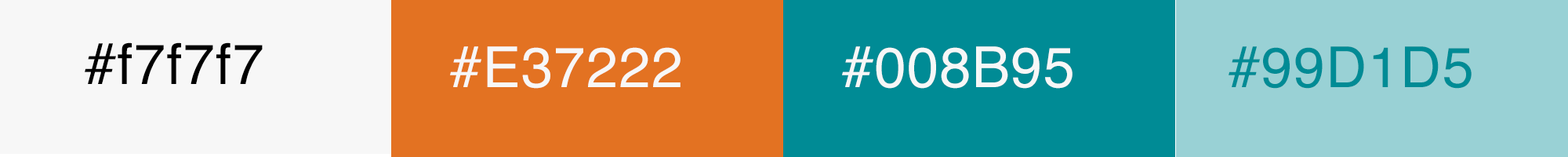
<style>
.page{position:relative;width:1568px;height:157px;background:#f7f7f7}
.page>*{position:absolute;margin:0}
.t1{font:56.4px "Helvetica";letter-spacing:0.02em;color:#000000}
.t2{font:56.4px "Helvetica";letter-spacing:0.02em;color:#f7f7f7}
.t3{font:56.4px "Helvetica";letter-spacing:0.02em;color:#008b95}
</style>
<div class="page">
<p class="t1" style="left:85px;top:42px;width:178px;height:42px">#f7f7f7</p>
<p class="t2" style="left:450px;top:46px;width:231px;height:43px">#E37222</p>
<p class="t2" style="left:842px;top:46px;width:231px;height:43px">#008B95</p>
<p class="t3" style="left:1229px;top:46px;width:243px;height:43px">#99D1D5</p>
</div>
